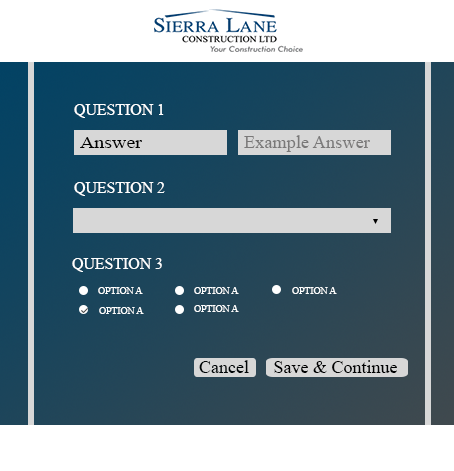
<style>
.page{position:relative;width:454px;height:471px;background:#ffffff}
.page>*{position:absolute;margin:0}
.t1{font:15.8px "TimesNewRomanPSMT";color:#feffff}
.t2{font:16.7px "TimesNewRomanPSMT";color:#000000;scale:1.19 1}
.t3{font:17.6px "TimesNewRomanPSMT";color:#7a7979;scale:1.04 1}
.t4{font:10px "TimesNewRomanPSMT";color:#feffff;scale:0.97 1}
.t5{font:18px "TimesNewRomanPSMT";color:#000507}
.t6{font:18px "TimesNewRomanPSMT";color:#000102}
</style>
<div class="page">
<p class="t1" style="left:74px;top:104px;width:90px;height:14px">QUESTION 1</p>
<p class="t2" style="left:80px;top:137px;width:62px;height:11px">Answer</p>
<p class="t3" style="left:244px;top:135px;width:126px;height:17px">Example Answer</p>
<p class="t1" style="left:74px;top:182px;width:91px;height:14px">QUESTION 2</p>
<p class="t1" style="left:72px;top:258px;width:90px;height:14px">QUESTION 3</p>
<p class="t4" style="left:98px;top:287px;width:45px;height:7px">OPTION A</p>
<p class="t4" style="left:194px;top:287px;width:45px;height:7px">OPTION A</p>
<p class="t4" style="left:292px;top:287px;width:45px;height:7px">OPTION A</p>
<p class="t4" style="left:194px;top:305px;width:45px;height:7px">OPTION A</p>
<p class="t4" style="left:99px;top:307px;width:45px;height:7px">OPTION A</p>
<p class="t5" style="left:199px;top:360px;width:50px;height:13px">Cancel</p>
<p class="t6" style="left:274px;top:360px;width:123px;height:13px">Save &amp; Continue</p>
</div>
